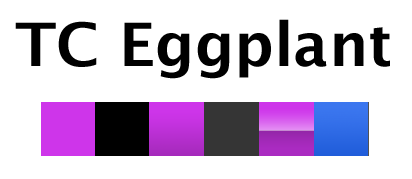
<style>
.page{position:relative;width:412px;height:179px;background:#ffffff}
.page>*{position:absolute;margin:0}
.t1{font:60px "LucidaGrande-Bold";color:#000000}
</style>
<div class="page">
<p class="t1" style="left:15px;top:19px;width:375px;height:60px">TC Eggplant</p>
</div>
